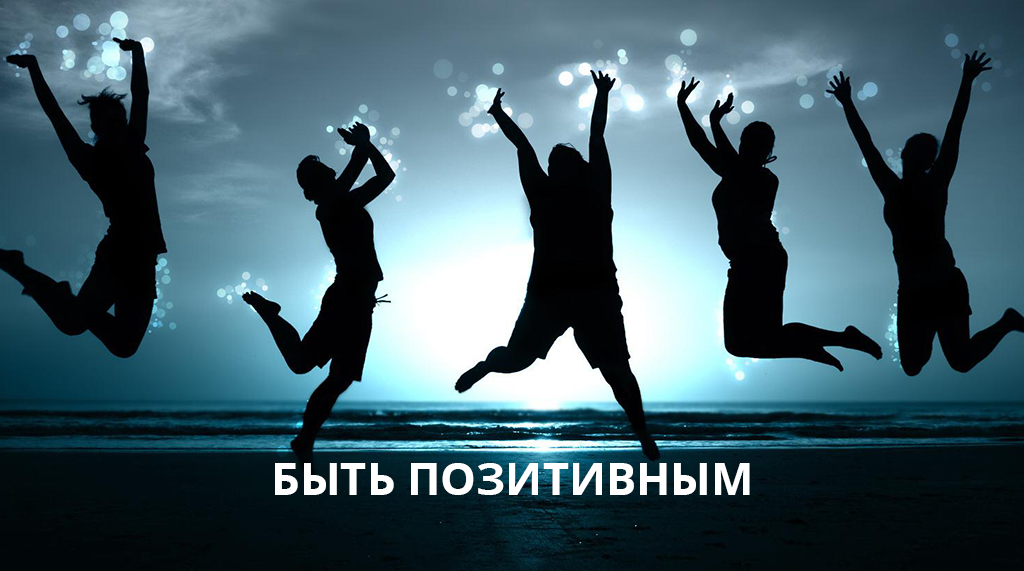
<style>
.page{position:relative;width:1024px;height:571px}
.page>*{position:absolute;margin:0}
.t1{font:45px "OpenSans-Bold";color:#ffffff;text-transform:uppercase}
</style>
<div class="page">
<p class="t1" style="left:275px;top:463px;width:475px;height:32px">Быть позитивным</p>
</div>
